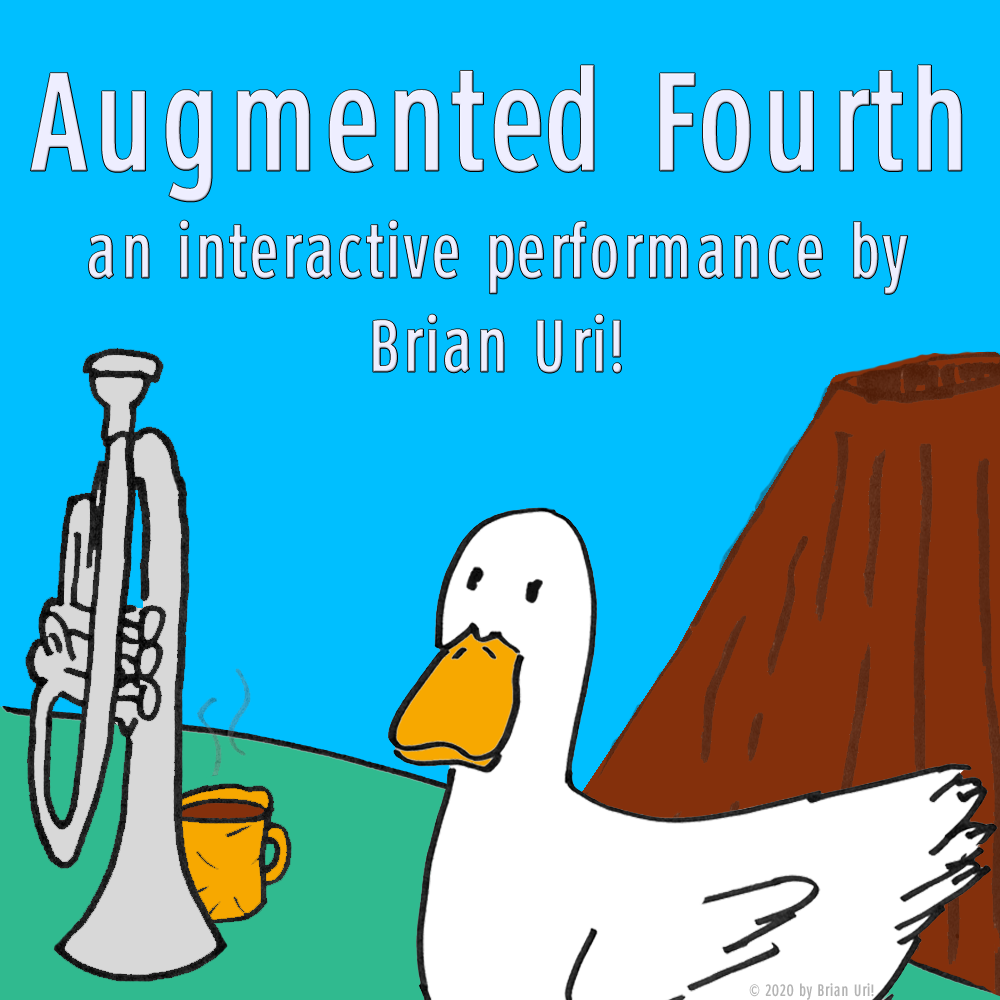
<style>
.page{position:relative;width:1000px;height:1000px;background:#00bfff}
.page>*{position:absolute;margin:0}
.t1{font:75px "Roadgeek2005Series1B";color:#eeeeff}
.t2{font:141.7px "Roadgeek2005Series1B";color:#eeeeff}
.t3{font:16.7px "Roadgeek2005Series1B";color:#b4b4b4}
</style>
<div class="page">
<p class="t1" style="left:30px;top:65px;width:932px;height:308px;text-align:center"><span class="t2">Augmented Fourth<br></span>an interactive performance by<br>Brian Uri!</p>
<p class="t3" style="left:749px;top:983px;width:125px;height:17px">© 2020 by Brian Uri!</p>
</div>
